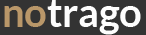
<style>
.page{position:relative;width:146px;height:35px;background:#333333}
.page>*{position:absolute;margin:0}
.t1{font:39.7px "Lato-Bold";color:#fdfdfd}
.t2{font:39.7px "Lato-Bold";color:#b99769}
</style>
<div class="page">
<p class="t1" style="left:4px;top:0px;width:137px;height:35px"><span class="t2">no</span>trago</p>
</div>
